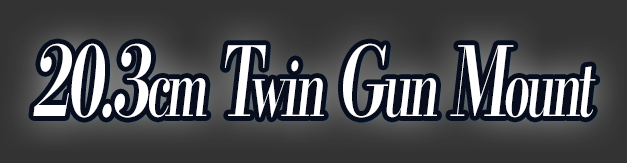
<style>
.page{position:relative;width:627px;height:163px}
.page>*{position:absolute;margin:0}
.t1{font:96px "KochoStd-Heavy";letter-spacing:-0.08em;color:#ffffff;font-style:italic;scale:0.63 1}
.t2{font:76.8px "KochoStd-Heavy";letter-spacing:-0.08em;color:#ffffff;font-style:italic;scale:0.63 1}
</style>
<div class="page">
<p class="t1" style="left:33px;top:43px;width:563px;height:75px">20.3<span class="t2">cm</span> T<span class="t2">win</span> G<span class="t2">un</span> M<span class="t2">ount</span></p>
</div>
